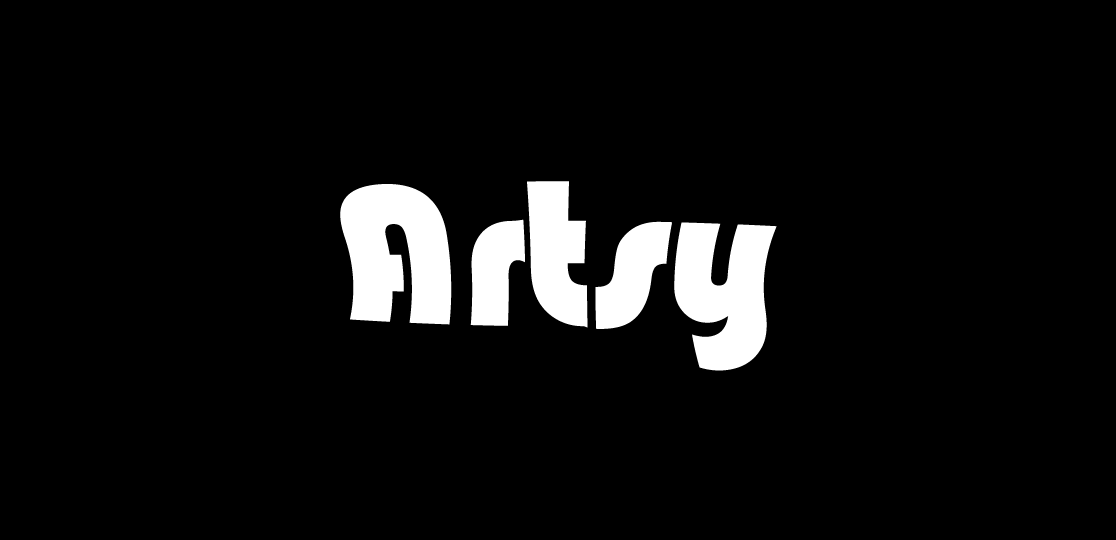
<style>
.page{position:relative;width:1116px;height:540px;background:#000000}
.page>*{position:absolute;margin:0}
.t1{font:188.6px "Bauhaus93";color:#ffffff;scale:1.26 1}
</style>
<div class="page">
<p class="t1" style="left:340px;top:181px;width:437px;height:190px">Artsy</p>
</div>
